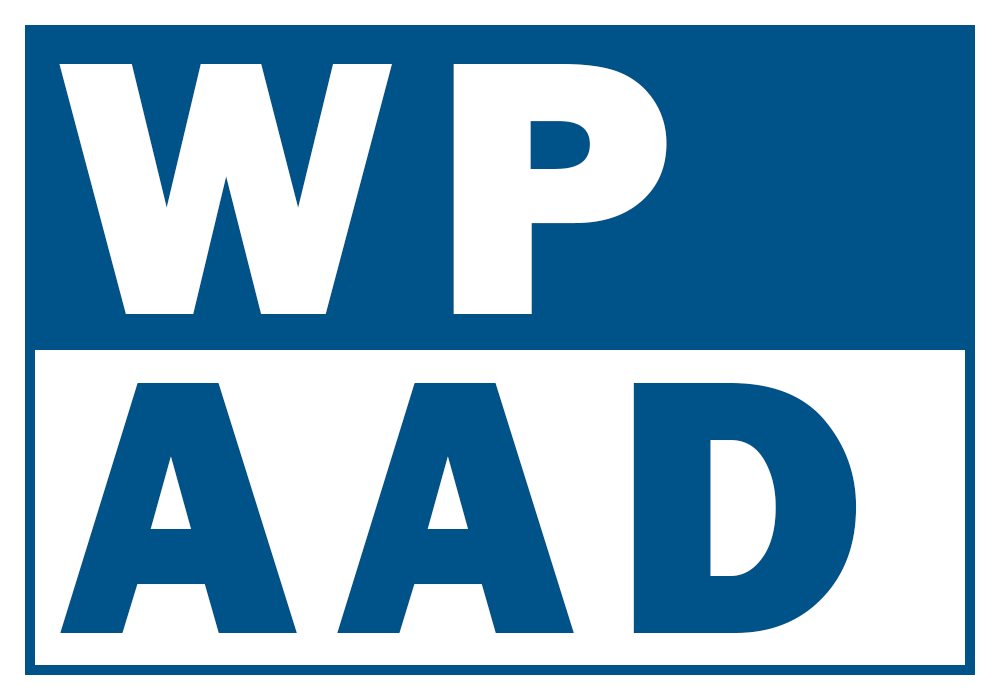
<style>
.page{position:relative;width:1000px;height:700px;background:#ffffff}
.page>*{position:absolute;margin:0}
.t1{font:375px "FranklinGothic-Heavy";letter-spacing:0.1em;color:#ffffff}
.t2{font:375px "FranklinGothic-Heavy";letter-spacing:0.1em;color:#005388}
</style>
<div class="page">
<p class="t1" style="left:59px;top:64px;width:608px;height:250px">WP</p>
<p class="t2" style="left:60px;top:383px;width:797px;height:250px">AAD</p>
</div>
